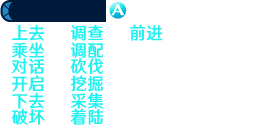
<style>
.page{position:relative;width:256px;height:128px;background:#ffffff}
.page>*{position:absolute;margin:0}
.t1{font:17.3px/17.3px "HYWenHei-FEW";letter-spacing:0.025em;color:#23f1f1;scale:0.95 1}
.t2{font:17.3px/16px "HYWenHei-FEW";letter-spacing:0.025em;color:#23f1f1;scale:0.95 1}
.t3{font:17.3px "HYWenHei-FEW";letter-spacing:0.025em;color:#23f1f1;scale:0.95 1}
</style>
<div class="page">
<p class="t1" style="left:11px;top:24px;width:34px;height:101px;text-align:center">上去<br><span class="t2">乘坐<br></span>对话<br>开启<br><span class="t2">下去<br>破坏</span></p>
<p class="t1" style="left:70px;top:25px;width:34px;height:100px;text-align:center">调查<br><span class="t2">调配<br></span>砍伐<br>挖掘<br><span class="t2">采集<br>着陆</span></p>
<p class="t3" style="left:130px;top:24px;width:33px;height:17px">前进</p>
</div>
